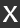
<style>
.page{position:relative;width:20px;height:28px;background:#333333}
.page>*{position:absolute;margin:0}
.t1{font:33.3px "Candara";color:#ffffff}
</style>
<div class="page">
<p class="t1" style="left:3px;top:6px;width:15px;height:16px">x</p>
</div>
